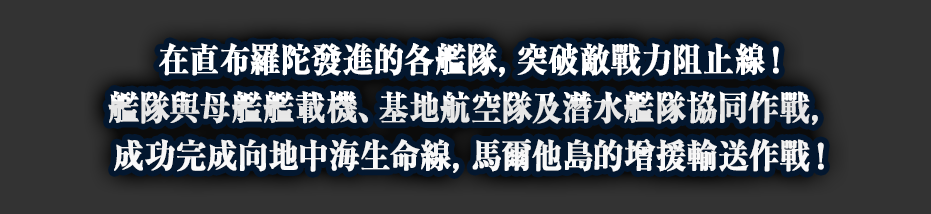
<style>
.page{position:relative;width:931px;height:214px;background:#333333}
.page>*{position:absolute;margin:0}
.t1{font:34px/48px "RyuminPr6N-ExBold";color:#ffffff;font-weight:bold;scale:0.9 1}
</style>
<div class="page">
<p class="t1" style="left:108px;top:43px;width:716px;height:130px;text-align:center">在直布羅陀發進的各艦隊，突破敵戰力阻止線！<br>艦隊與母艦艦載機、基地航空隊及潛水艦隊協同作戰，<br>成功完成向地中海生命線，馬爾他島的增援輸送作戰！</p>
</div>
